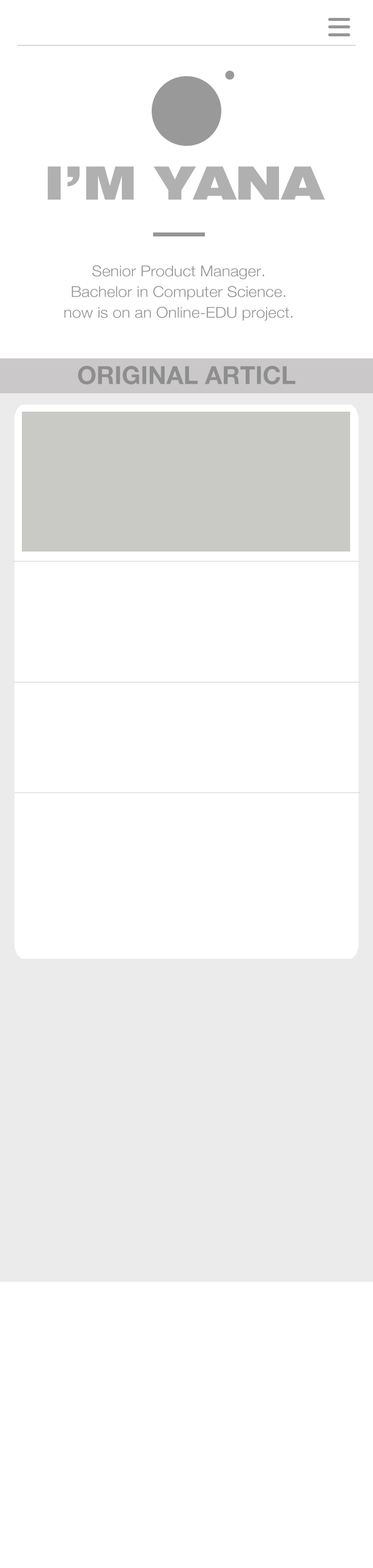
<style>
.page{position:relative;width:373px;height:1568px;background:#ffffff}
.page>*{position:absolute;margin:0}
.t1{font:46.3px "HelveticaNeueLTPro-BlkEx";color:#b0b0b0}
.t2{font:14.9px/20.7px "HelveticaNeue-Light";color:#959595;scale:1.08 1}
.t3{font:24.9px "HelveticaNeue-Bold";color:#8f8e8e;text-transform:uppercase}
</style>
<div class="page">
<p class="t1" style="left:48px;top:166px;width:277px;height:34px">I’M YANA</p>
<p class="t2" style="left:64px;top:265px;width:229px;height:56px;text-align:center">Senior Product Manager.<br>Bachelor in Computer Science.<br>now is on an Online-EDU project.</p>
<p class="t3" style="left:78px;top:366px;width:218px;height:19px">Original Articl</p>
</div>
